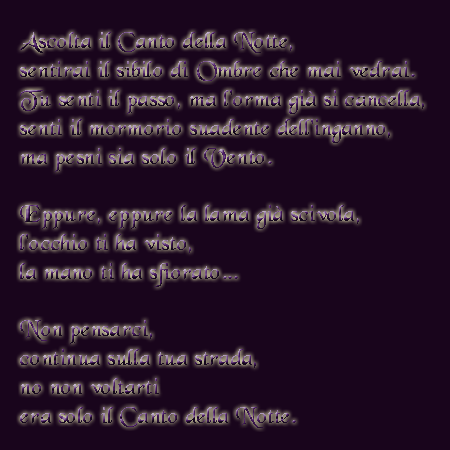
<style>
.page{position:relative;width:450px;height:450px;background:#19051c}
.page>*{position:absolute;margin:0}
.t1{font:24px "BlackChancery"}
</style>
<div class="page">
<p class="t1" style="left:20px;top:32px;width:404px;height:396px">Ascolta il Canto della Notte,<br>sentirai il sibilo di Ombre che mai vedrai.<br>Tu senti il passo, ma l'orma già si cancella,<br>senti il mormorio suadente dell'inganno,<br>ma pesni sia solo il Vento.<br><br>Eppure, eppure la lama già scivola,<br>l'occhio ti ha visto, <br>la mano ti ha sfiorato...<br><br>Non pensarci, <br>continua sulla tua strada, <br>no non voltarti<br>era solo il Canto della Notte.</p>
</div>
